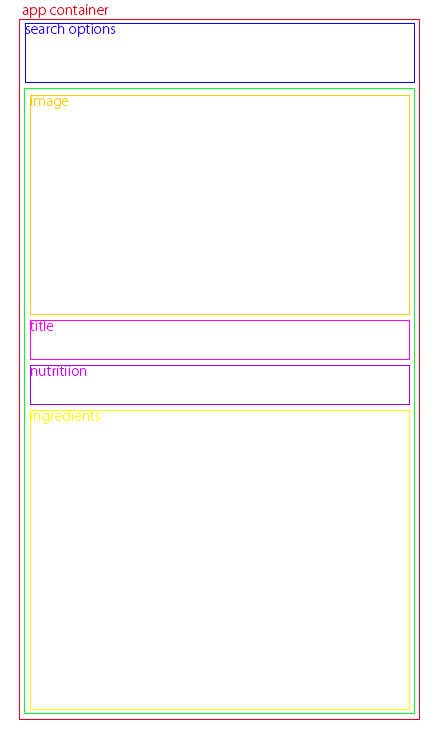
<style>
.page{position:relative;width:440px;height:740px;background:#ffffff}
.page>*{position:absolute;margin:0}
.t1{font:14px "KozGoPro-Light";color:#e6001c}
.t2{font:14px "KozGoPro-Light";color:#3300ff}
.t3{font:14px "KozGoPro-Light";color:#ffcc00}
.t4{font:14px "KozGoPro-Light";color:#ff00ff}
.t5{font:14px "KozGoPro-Light";color:#cc00ff}
.t6{font:14px "KozGoPro-Light";color:#ffff00}
</style>
<div class="page">
<p class="t1" style="left:22px;top:4px;width:87px;height:14px">app container</p>
<p class="t2" style="left:25px;top:23px;width:91px;height:14px">search options</p>
<p class="t3" style="left:31px;top:95px;width:38px;height:14px">image</p>
<p class="t4" style="left:29px;top:320px;width:25px;height:11px">title</p>
<p class="t5" style="left:31px;top:365px;width:56px;height:11px">nutritiion</p>
<p class="t6" style="left:31px;top:410px;width:69px;height:14px">ingredients</p>
</div>
